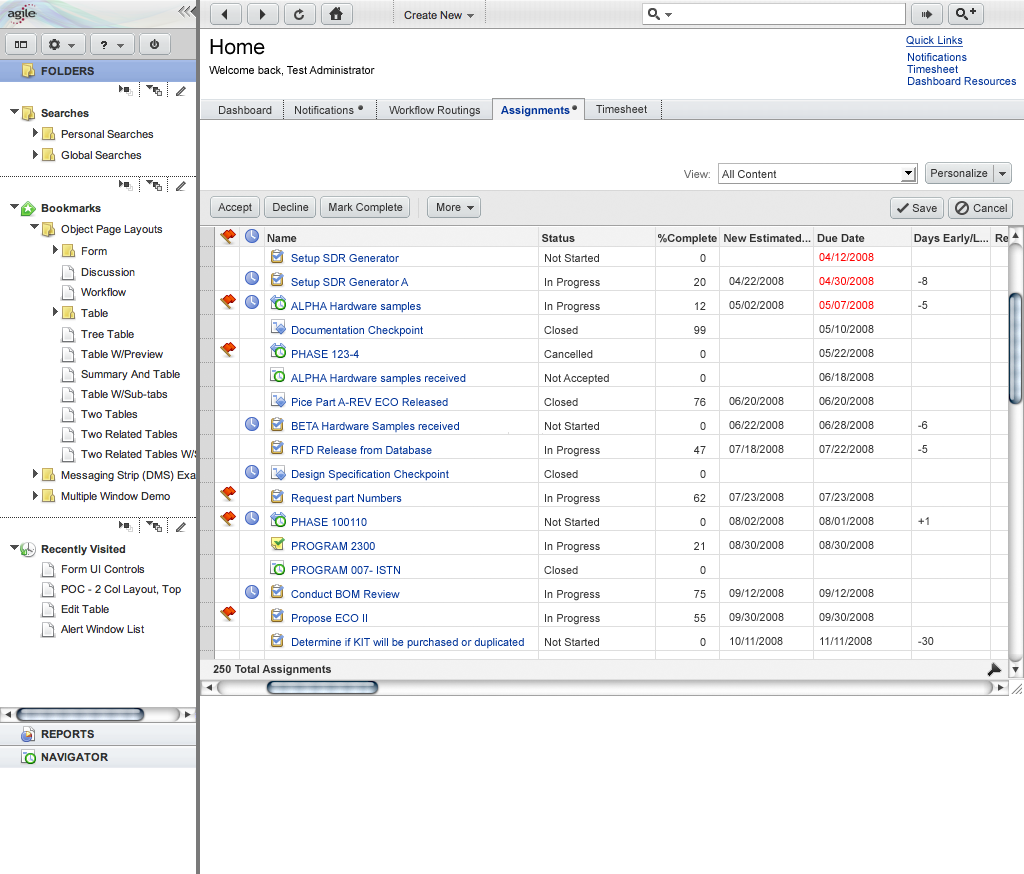
<style>
.page{position:relative;width:1024px;height:874px;background:#ffffff}
.page>*{position:absolute;margin:0}
.t1{font:11px/20px "ArialMT";color:#000000}
.t2{font:21px/20px "ArialMT";color:#000000}
.t3{font:11px "ArialMT";color:#003399;text-decoration:underline}
.t4{font:11px/12px "ArialMT";color:#003399}
.t5{font:11px "ArialMT";color:#333333}
.t6{font:11px "Arial-BoldMT";color:#003399}
.t7{font:11px "ArialMT";letter-spacing:0.005em;color:#666666}
.t8{font:11px "ArialMT";letter-spacing:0.005em;color:#303030}
.t9{font:11px "ArialMT";color:#303030}
.t10{font:11px "Arial-BoldMT";color:#303030}
.t11{font:11px/24px "ArialMT";color:#003399}
.t12{font:11px/24px "ArialMT";color:#333333}
.t13{font:11px/24px "ArialMT";color:#ff0000}
</style>
<div class="page">
<p class="t1" style="left:209px;top:39px;width:166px;height:37px"><span class="t2">Home<br></span>Welcome back, Test Administrator</p>
<p class="t3" style="left:906px;top:36px;width:57px;height:11px">Quick Links</p>
<p class="t4" style="left:907px;top:53px;width:109px;height:32px">Notifications<br>Timesheet<br>Dashboard Resources</p>
<p class="t5" style="left:219px;top:106px;width:53px;height:8px">Dashboard</p>
<p class="t5" style="left:295px;top:106px;width:59px;height:8px">Notifications</p>
<p class="t5" style="left:389px;top:106px;width:91px;height:11px">Workflow Routings</p>
<p class="t6" style="left:501px;top:106px;width:69px;height:11px">Assignments</p>
<p class="t5" style="left:596px;top:105px;width:51px;height:8px">Timesheet</p>
<p class="t7" style="left:684px;top:170px;width:26px;height:8px">View:</p>
<p class="t8" style="left:722px;top:170px;width:55px;height:8px">All Content</p>
<p class="t9" style="left:931px;top:169px;width:57px;height:8px">Personalize</p>
<p class="t9" style="left:218px;top:203px;width:34px;height:11px">Accept</p>
<p class="t9" style="left:273px;top:203px;width:36px;height:8px">Decline</p>
<p class="t9" style="left:329px;top:203px;width:74px;height:11px">Mark Complete</p>
<p class="t9" style="left:437px;top:203px;width:24px;height:8px">More</p>
<p class="t9" style="left:912px;top:204px;width:25px;height:8px">Save</p>
<p class="t9" style="left:973px;top:204px;width:34px;height:8px">Cancel</p>
<p class="t10" style="left:267px;top:234px;width:742px;height:11px">Name                                                                                Status                           %Complete  New Estimated...  Due Date                Days Early/L...  Re</p>
<p class="t11" style="left:291px;top:254px;width:233px;height:395px">Setup SDR Generator <br>Setup SDR Generator A<br>ALPHA Hardware samples<br>Documentation Checkpoint<br>PHASE 123-4<br>ALPHA Hardware samples received<br>Pice Part A-REV ECO Released<br>BETA Hardware Samples received<br>RFD Release from Database<br>Design Specification Checkpoint<br>Request part Numbers <br>PHASE 100110<br>PROGRAM 2300<br>PROGRAM 007- ISTN<br>Conduct BOM Review<br>Propose ECO II<br>Determine if KIT will be purchased or duplicated</p>
<p class="t12" style="left:544px;top:254px;width:65px;height:392px">Not Started<br>In Progress<br>In Progress<br>Closed<br>Cancelled<br>Not Accepted<br>Closed<br>Not Started<br>In Progress<br>Closed<br>In Progress<br>Not Started<br>In Progress<br>Closed<br>In Progress<br>In Progress<br>Not Started</p>
<p class="t12" style="left:694px;top:254px;width:12px;height:392px;text-align:right">0<br>20<br>12<br>99<br>0<br>0<br>76<br>0<br>47<br>0<br>62<br>0<br>21<br>0<br>75<br>55<br>0</p>
<p class="t12" style="left:819px;top:253px;width:55px;height:392px"><span class="t13">04/12/2008<br>04/30/2008<br>05/07/2008<br></span>05/10/2008<br>05/22/2008<br>06/18/2008<br>06/20/2008<br>06/28/2008<br>07/22/2008<br><br>07/23/2008<br>08/01/2008<br>08/30/2008<br><br>09/12/2008<br>09/30/2008<br>11/11/2008</p>
<p class="t12" style="left:729px;top:277px;width:55px;height:368px">04/22/2008<br>05/02/2008<br><br><br><br>06/20/2008<br>06/22/2008<br>07/18/2008<br><br>07/23/2008<br>08/02/2008<br>08/30/2008<br><br>09/12/2008<br>09/30/2008<br>10/11/2008</p>
<p class="t12" style="left:918px;top:277px;width:16px;height:368px">-8<br>-5<br><br><br><br><br>-6<br>-5<br><br><br>+1<br><br><br><br><br>-30</p>
<p class="t10" style="left:213px;top:665px;width:118px;height:11px">250 Total Assignments</p>
</div>
